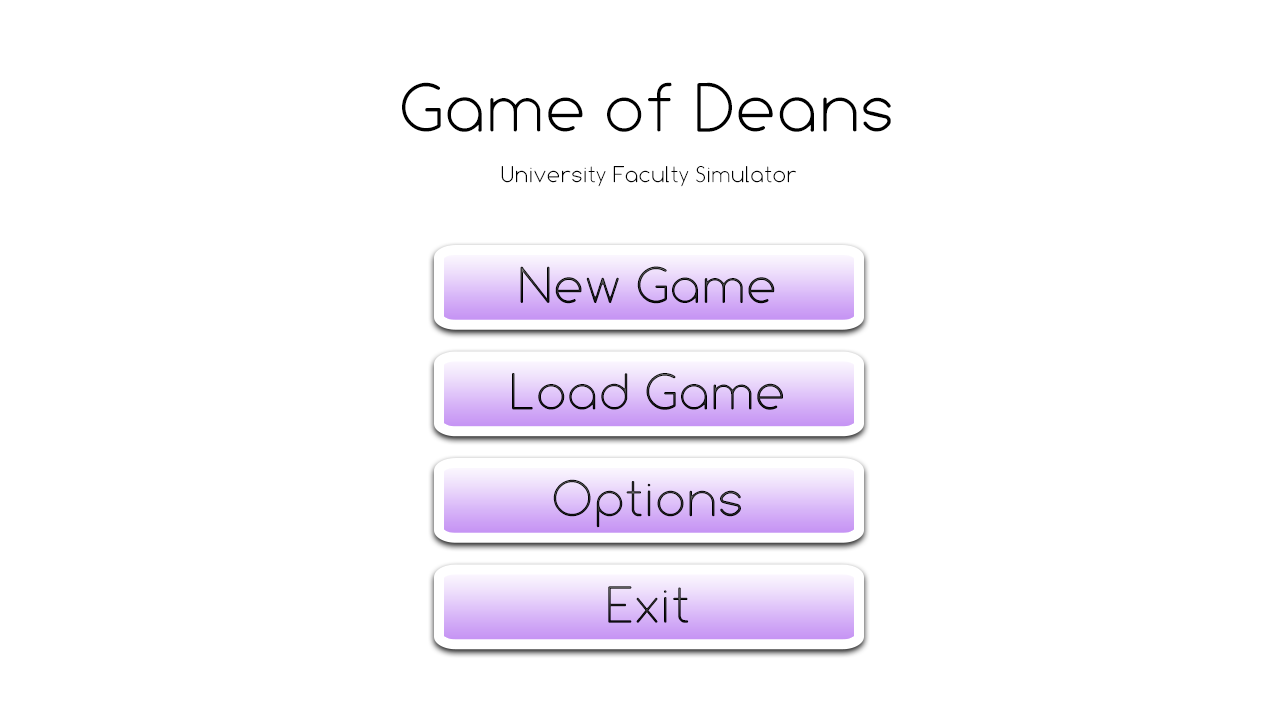
<style>
.page{position:relative;width:1280px;height:720px;background:#ffffff}
.page>*{position:absolute;margin:0}
.t1{font:72px "Comfortaa-Light";color:#000000}
.t2{font:24px "Comfortaa-Light";color:#000000}
.t3{font:54px "Comfortaa-Light";color:#121212}
.t4{font:54px "Comfortaa-Light";color:#131313}
.t5{font:54px "Comfortaa-Light";color:#181918}
.t6{font:54px "Comfortaa-Light"}
</style>
<div class="page">
<p class="t1" style="left:402px;top:82px;width:489px;height:50px">Game of Deans</p>
<p class="t2" style="left:501px;top:166px;width:295px;height:21px">University Faculty Simulator</p>
<p class="t3" style="left:520px;top:266px;width:255px;height:38px">New Game</p>
<p class="t4" style="left:512px;top:373px;width:271px;height:37px">Load Game</p>
<p class="t5" style="left:553px;top:479px;width:188px;height:49px">Options</p>
<p class="t6" style="left:608px;top:586px;width:81px;height:37px">Exit</p>
</div>
